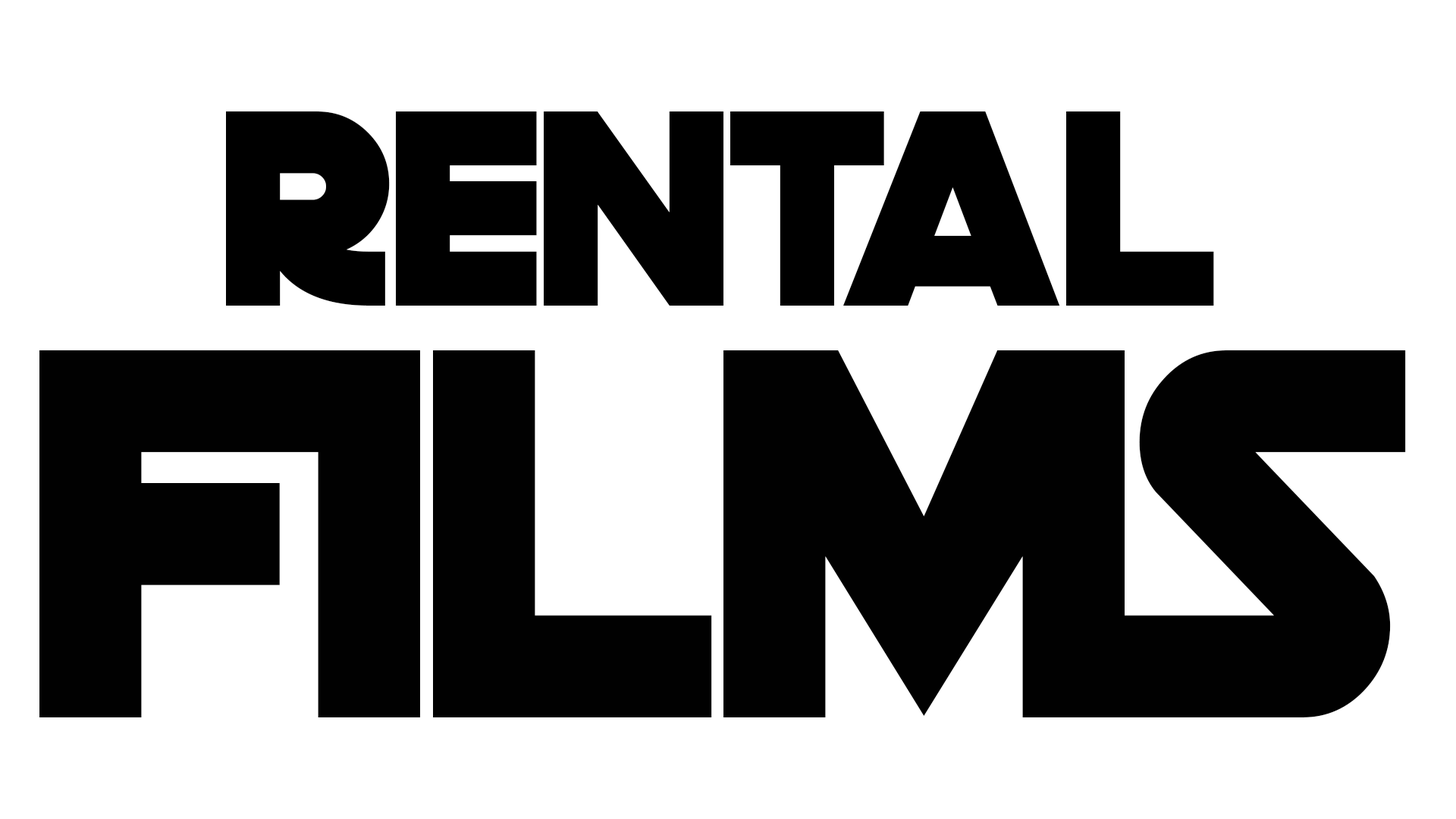
<style>
.page{position:relative;width:1456px;height:819px;background:#ffffff}
.page>*{position:absolute;margin:0}
.t1{font:274.4px "DeathStar";color:#000000}
.t2{font:518.4px "DeathStar";color:#010101}
</style>
<div class="page">
<p class="t1" style="left:226px;top:111px;width:988px;height:195px">rental</p>
<p class="t2" style="left:39px;top:350px;width:1367px;height:367px">FILMS</p>
</div>
